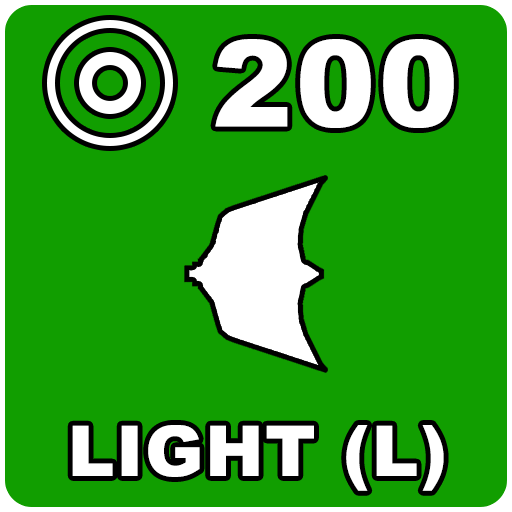
<style>
.page{position:relative;width:512px;height:512px;background:#119e00}
.page>*{position:absolute;margin:0}
.t1{font:120px "Arial-Black";letter-spacing:0.025em;color:#ffffff}
.t2{font:70px "Arial-Black";letter-spacing:0.025em;color:#ffffff}
</style>
<div class="page">
<p class="t1" style="left:215px;top:39px;width:239px;height:89px">200</p>
<p class="t2" style="left:72px;top:425px;width:372px;height:66px">LIGHT (L)</p>
</div>
